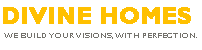
<style>
.page{position:relative;width:202px;height:50px;background:#ffffff}
.page>*{position:absolute;margin:0}
.t1{font:22.7px "GillSansMT-Bold";color:#ffc000;text-transform:uppercase;font-weight:bold}
.t2{font:6.7px "GillSansMT-Bold";color:#72706a;text-transform:uppercase;font-weight:bold;scale:1.13 1}
</style>
<div class="page">
<p class="t1" style="left:3px;top:7px;width:188px;height:17px">Divine Homes</p>
<p class="t2" style="left:4px;top:33px;width:193px;height:6px">We build your visions, with perfection.</p>
</div>
